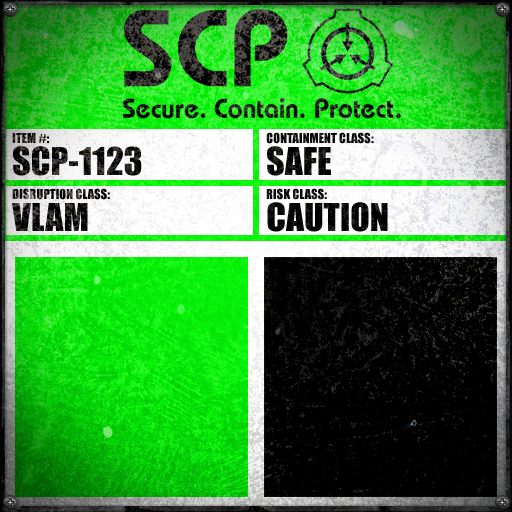
<style>
.page{position:relative;width:512px;height:512px}
.page>*{position:absolute;margin:0}
.t1{font:35.6px/32.1px "Impact"}
.t2{font:12.8px "Impact";text-transform:uppercase}
.t3{font:12.8px "Impact";color:#000000;text-transform:uppercase}
.t4{font:35.6px/32.1px "Impact";color:#000000;text-transform:uppercase}
.t5{font:35.6px/32.1px "Impact";text-transform:uppercase}
</style>
<div class="page">
<p class="t1" style="left:12px;top:133px;width:130px;height:43px"><span class="t2">Item #:<br></span>SCP-1123</p>
<p class="t3" style="left:266px;top:132px;width:108px;height:44px">Containment Class:<br><span class="t4">Safe</span></p>
<p class="t2" style="left:12px;top:188px;width:98px;height:43px">Disruption Class:<br><span class="t5">vlam</span></p>
<p class="t3" style="left:266px;top:188px;width:122px;height:44px">Risk Class:<br><span class="t4">caution</span></p>
</div>
